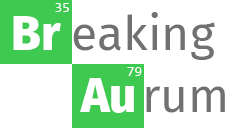
<style>
.page{position:relative;width:225px;height:128px;background:#ffffff}
.page>*{position:absolute;margin:0}
.t1{font:14px "Consolas";color:#ffffff}
.t2{font:48px "FiraSans-ExtraBold";color:#ffffff}
.t3{font:48px "FiraSans-Regular";color:#717171}
</style>
<div class="page">
<p class="t1" style="left:55px;top:3px;width:14px;height:9px">35</p>
<p class="t2" style="left:13px;top:16px;width:48px;height:34px">Br</p>
<p class="t3" style="left:73px;top:12px;width:142px;height:48px">eaking</p>
<p class="t2" style="left:80px;top:78px;width:54px;height:35px">Au</p>
<p class="t1" style="left:127px;top:67px;width:15px;height:9px">79</p>
<p class="t3" style="left:146px;top:86px;width:79px;height:27px">rum</p>
</div>
